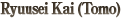
<style>
.page{position:relative;width:121px;height:19px;background:#ffffff}
.page>*{position:absolute;margin:0}
.t1{font:16px "RyuminPro-ExBold";letter-spacing:-0.08em;color:#4a3f32;font-weight:bold;scale:0.88 1}
</style>
<div class="page">
<p class="t1" style="left:0px;top:2px;width:121px;height:16px">Ryuusei Kai (Tomo)</p>
</div>
